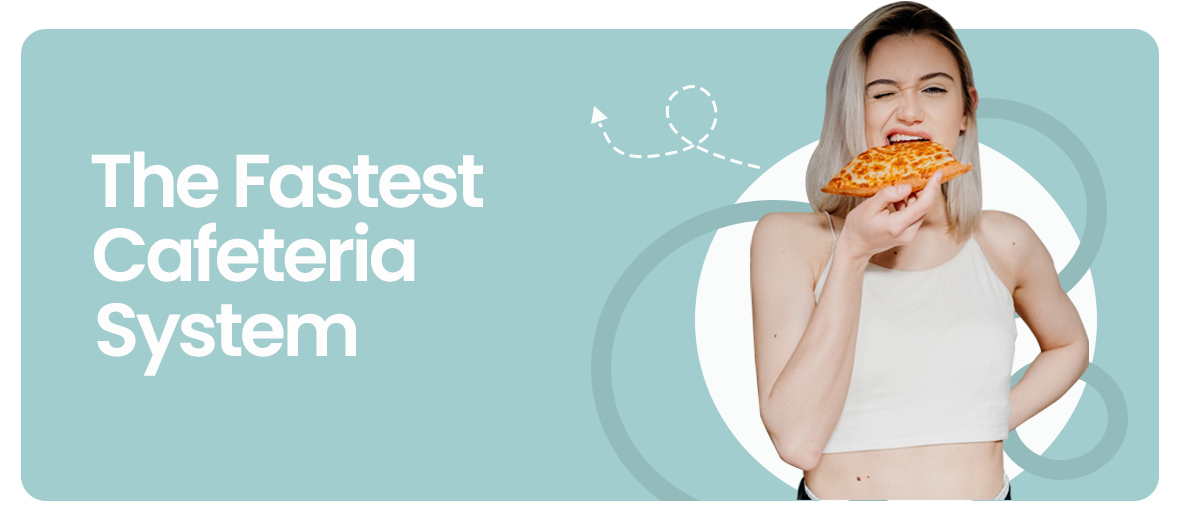
<style>
.page{position:relative;width:1178px;height:515px;background:#a1cdce}
.page>*{position:absolute;margin:0}
.t1{font:75px "Poppins-SemiBold";letter-spacing:-0.05em;color:#fdfdfd}
</style>
<div class="page">
<p class="t1" style="left:91px;top:151px;width:392px;height:57px">The Fastest</p>
<p class="t1" style="left:94px;top:222px;width:321px;height:60px">Cafeteria</p>
<p class="t1" style="left:97px;top:303px;width:259px;height:73px">System</p>
</div>
